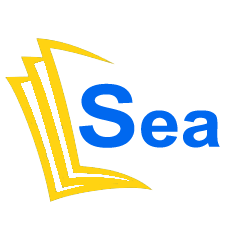
<style>
.page{position:relative;width:240px;height:240px;background:#ffffff}
.page>*{position:absolute;margin:0}
.t1{font:68px "Arial-BoldMT";color:#0068ef;scale:1.1 1}
.t2{font:86px "Arial-BoldMT";color:#0068ef;scale:1.1 1}
</style>
<div class="page">
<p class="t1" style="left:79px;top:83px;width:141px;height:65px"><span class="t2">S</span>ea</p>
</div>
